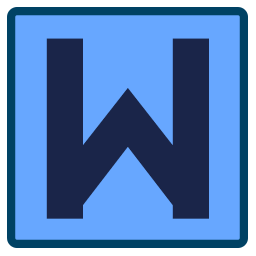
<style>
.page{position:relative;width:256px;height:256px;background:#67a7ff}
.page>*{position:absolute;margin:0}
.t1{font:180px "GreenHillSans";color:#1a2549}
</style>
<div class="page">
<p class="t1" style="left:46px;top:38px;width:163px;height:181px">w</p>
</div>
